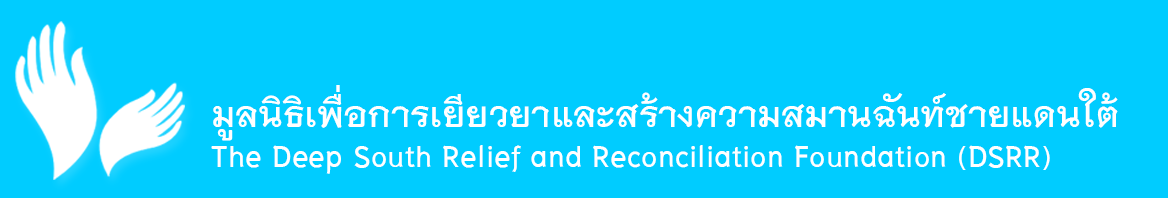
<style>
.page{position:relative;width:1168px;height:198px;background:#00ccff}
.page>*{position:absolute;margin:0}
.t1{font:51.3px "THNiramitAS-Bold";color:#ffffff}
.t2{font:43.5px "THNiramitAS-Bold";color:#ffffff}
</style>
<div class="page">
<p class="t1" style="left:213px;top:85px;width:905px;height:56px">มูลนิธิเพื่อการเยียวยาและสร้างความสมานฉันท์ชายแดนใต้</p>
<p class="t2" style="left:211px;top:145px;width:839px;height:29px">The Deep South Relief and Reconciliation Foundation (DSRR)</p>
</div>
